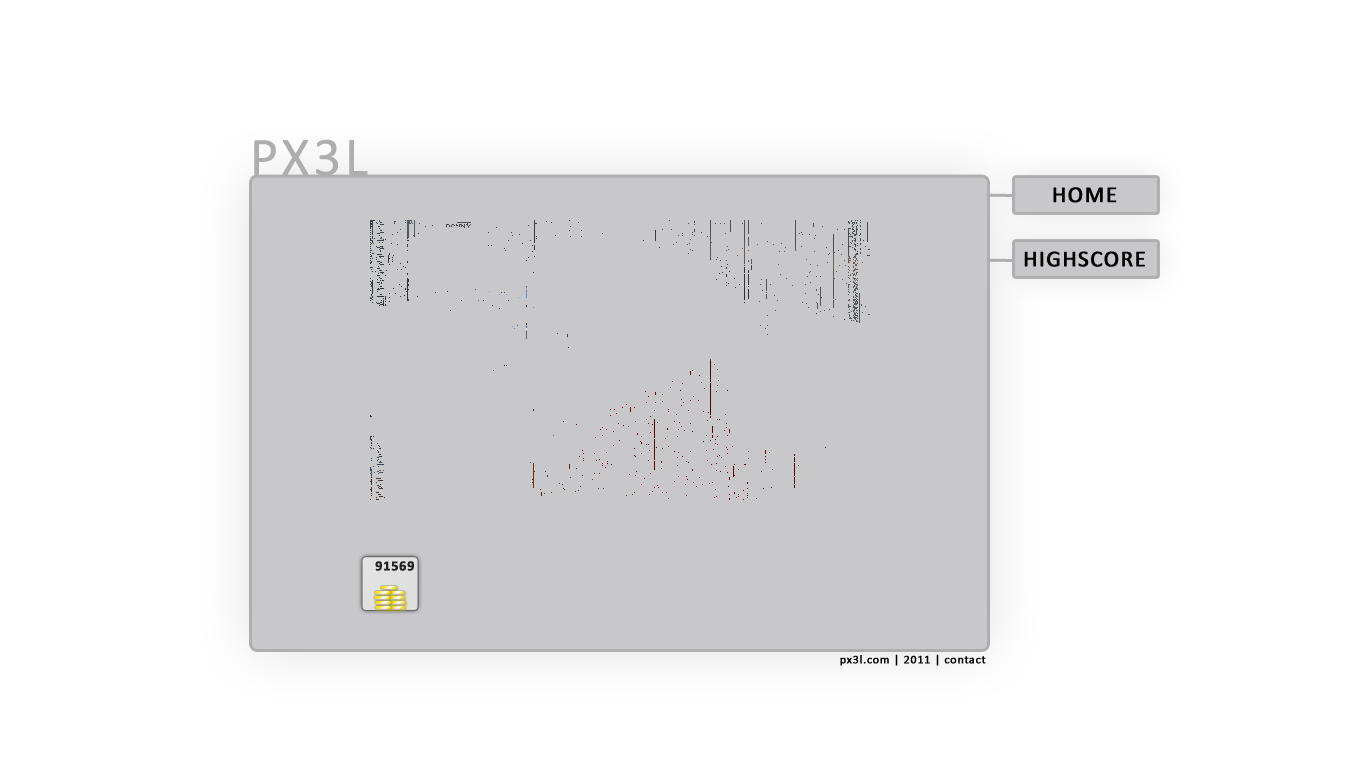
<style>
.page{position:relative;width:1366px;height:768px;background:#ffffff}
.page>*{position:absolute;margin:0}
.t1{font:55px "Calibri";letter-spacing:0.04em;color:#afaeae;font-weight:bold}
.t2{font:23px "Calibri";letter-spacing:0.04em;color:#000000;font-weight:bold}
.t3{font:14px "Calibri-Bold";letter-spacing:0.04em;color:#242424;font-weight:bold}
.t4{font:12px "Calibri";letter-spacing:0.04em;color:#000000;font-weight:bold}
</style>
<div class="page">
<p class="t1" style="left:254px;top:139px;width:114px;height:37px">PX3L</p>
<p class="t2" style="left:1053px;top:187px;width:64px;height:16px">HOME</p>
<p class="t2" style="left:1024px;top:251px;width:121px;height:16px">HIGHSCORE</p>
<p class="t3" style="left:375px;top:561px;width:39px;height:10px">91569</p>
<p class="t4" style="left:840px;top:654px;width:146px;height:12px">px3l.com | 2011 | contact</p>
</div>
